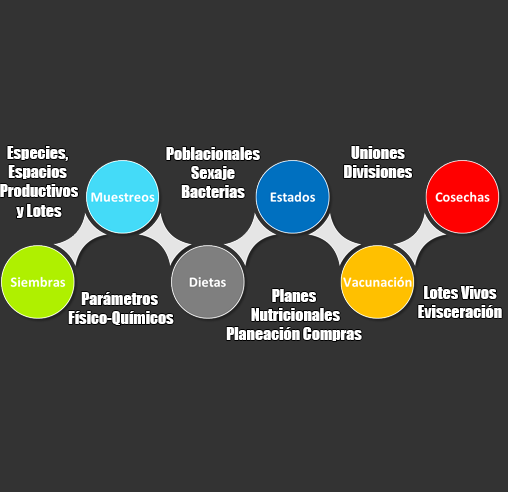
<style>
.page{position:relative;width:508px;height:492px;background:#333333}
.page>*{position:absolute;margin:0}
.t1{font:16px "Impact";color:#ffffff}
</style>
<div class="page">
<p class="t1" style="left:0px;top:146px;width:78px;height:72px;text-align:center">Especies, <br>Espacios <br>Productivos<br>y Lotes</p>
<p class="t1" style="left:166px;top:147px;width:94px;height:51px;text-align:center">Poblacionales<br>Sexaje<br>Bacterias</p>
<p class="t1" style="left:344px;top:146px;width:68px;height:32px;text-align:center">Uniones<br>Divisiones</p>
<p class="t1" style="left:68px;top:292px;width:106px;height:33px;text-align:center">Parámetros <br>Físico-Químicos</p>
<p class="t1" style="left:226px;top:289px;width:136px;height:52px;text-align:center">Planes<br> Nutricionales<br>Planeación Compras</p>
<p class="t1" style="left:418px;top:286px;width:84px;height:32px;text-align:center">Lotes Vivos<br>Evisceración</p>
</div>
